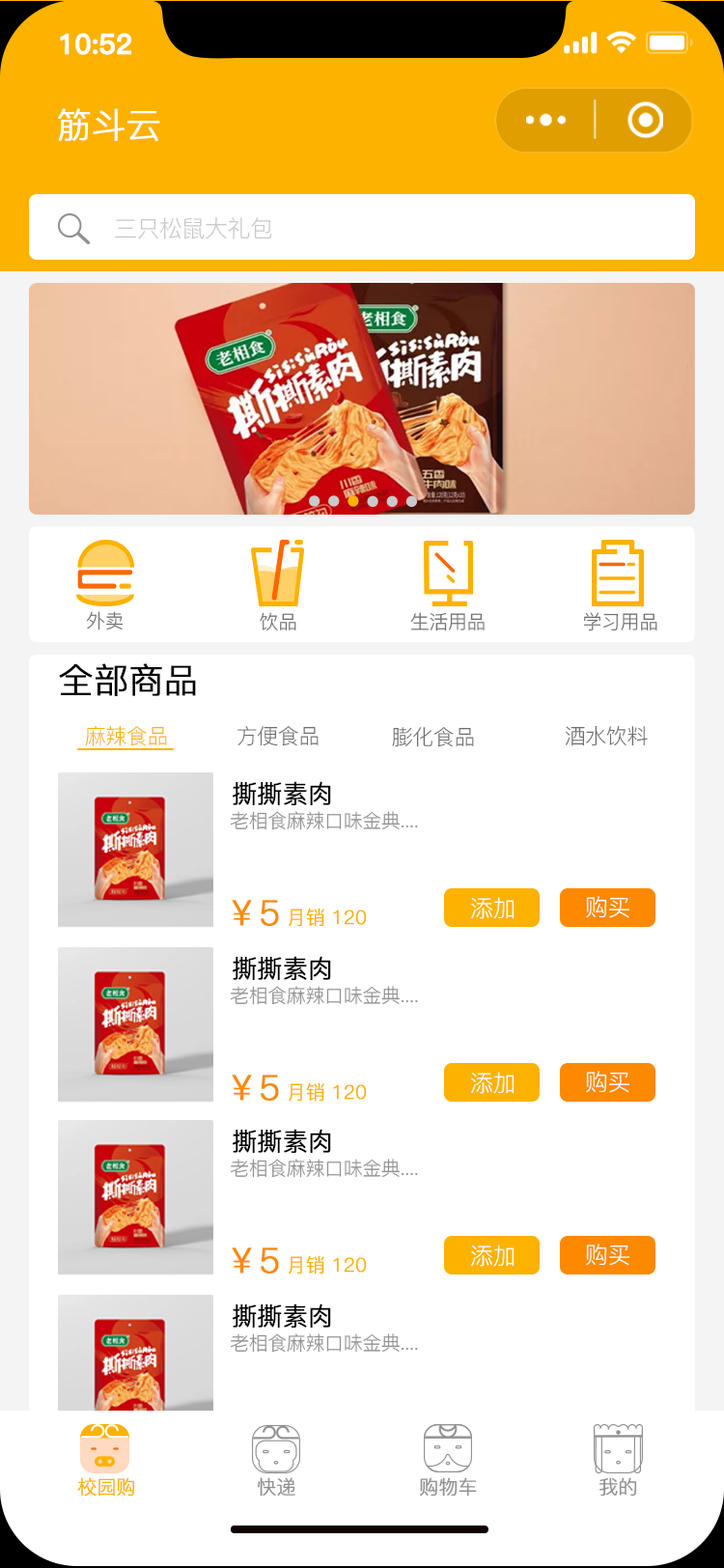
<style>
.page{position:relative;width:724px;height:1568px;background:#ffffff}
.page>*{position:absolute;margin:0}
.t1{font:27.5px "PingFang-SC-Bold";letter-spacing:-0.02em;color:#ffffff;font-weight:bold}
.t2{font:34.8px "PingFang-SC-Regular";letter-spacing:-0.02em;color:#ffffff;font-weight:bold}
.t3{font:23.2px "PingFang-SC-Regular";letter-spacing:-0.02em;color:#c9c9c9}
.t4{font:19.3px "PingFang-SC-Regular";letter-spacing:-0.02em;color:#707070}
.t5{font:34.8px "PingFang-SC-Regular";letter-spacing:-0.02em;color:#000000;font-weight:bold}
.t6{font:21.2px "PingFang-SC-Regular";letter-spacing:-0.02em;color:#fdb200}
.t7{font:21.2px "PingFang-SC-Regular";letter-spacing:-0.02em;color:#707070}
.t8{font:25.1px "PingFang-SC-Regular";letter-spacing:-0.02em;color:#000000;font-weight:bold}
.t9{font:19.3px "PingFang-SC-Regular";letter-spacing:-0.02em;color:#919191}
.t10{font:34.8px "PingFang-SC-Regular";letter-spacing:-0.02em;color:#fd8900;font-weight:bold}
.t11{font:23.2px "PingFang-SC-Regular";letter-spacing:-0.02em;color:#ffffff}
.t12{font:19.3px "PingFang-SC-Regular";letter-spacing:-0.02em;color:#fdb200;font-weight:bold}
.t13{font:19.3px "PingFang-SC-Regular";letter-spacing:-0.02em;color:#919191;font-weight:bold}
</style>
<div class="page">
<p class="t1" style="left:60px;top:33px;width:71px;height:22px">10:52</p>
<p class="t2" style="left:58px;top:108px;width:102px;height:34px">筋斗云</p>
<p class="t3" style="left:115px;top:217px;width:157px;height:22px">三只松鼠大礼包</p>
<p class="t4" style="left:86px;top:611px;width:38px;height:19px">外卖</p>
<p class="t4" style="left:260px;top:612px;width:36px;height:19px">饮品</p>
<p class="t4" style="left:410px;top:612px;width:75px;height:19px">生活用品</p>
<p class="t4" style="left:583px;top:612px;width:75px;height:19px">学习用品</p>
<p class="t5" style="left:59px;top:663px;width:137px;height:33px">全部商品</p>
<p class="t6" style="left:85px;top:725px;width:82px;height:21px">麻辣食品</p>
<p class="t7" style="left:566px;top:725px;width:82px;height:21px">酒水饮料</p>
<p class="t7" style="left:238px;top:726px;width:81px;height:20px">方便食品</p>
<p class="t7" style="left:392px;top:727px;width:82px;height:20px">膨化食品</p>
<p class="t8" style="left:233px;top:781px;width:98px;height:24px">撕撕素肉</p>
<p class="t9" style="left:230px;top:811px;width:188px;height:19px">老相食麻辣口味金典....</p>
<p class="t10" style="left:232px;top:900px;width:47px;height:26px">￥5</p>
<p class="t11" style="left:471px;top:897px;width:44px;height:22px">添加</p>
<p class="t11" style="left:586px;top:896px;width:44px;height:22px">购买</p>
<p class="t12" style="left:289px;top:908px;width:78px;height:19px">月销 120</p>
<p class="t8" style="left:233px;top:956px;width:98px;height:24px">撕撕素肉</p>
<p class="t9" style="left:230px;top:986px;width:188px;height:19px">老相食麻辣口味金典....</p>
<p class="t11" style="left:471px;top:1072px;width:44px;height:22px">添加</p>
<p class="t11" style="left:586px;top:1071px;width:44px;height:22px">购买</p>
<p class="t10" style="left:232px;top:1075px;width:47px;height:26px">￥5</p>
<p class="t12" style="left:289px;top:1082px;width:78px;height:20px">月销 120</p>
<p class="t8" style="left:233px;top:1129px;width:98px;height:24px">撕撕素肉</p>
<p class="t9" style="left:230px;top:1159px;width:188px;height:19px">老相食麻辣口味金典....</p>
<p class="t10" style="left:232px;top:1247px;width:47px;height:27px">￥5</p>
<p class="t11" style="left:471px;top:1245px;width:44px;height:22px">添加</p>
<p class="t11" style="left:586px;top:1244px;width:44px;height:22px">购买</p>
<p class="t12" style="left:289px;top:1255px;width:78px;height:19px">月销 120</p>
<p class="t8" style="left:233px;top:1303px;width:98px;height:25px">撕撕素肉</p>
<p class="t9" style="left:230px;top:1333px;width:188px;height:20px">老相食麻辣口味金典....</p>
<p class="t12" style="left:77px;top:1477px;width:58px;height:20px">校园购</p>
<p class="t13" style="left:257px;top:1477px;width:38px;height:20px">快递</p>
<p class="t13" style="left:420px;top:1477px;width:57px;height:20px">购物车</p>
<p class="t13" style="left:600px;top:1477px;width:37px;height:20px">我的</p>
</div>
